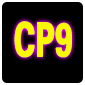
<style>
.page{position:relative;width:85px;height:85px;background:#000000}
.page>*{position:absolute;margin:0}
.t1{font:46.3px "FZZYK--GBK1-0";color:#f9f806;font-weight:bold;scale:0.67 1}
</style>
<div class="page">
<p class="t1" style="left:14px;top:21px;width:58px;height:37px">CP9</p>
</div>
